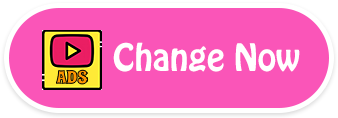
<style>
.page{position:relative;width:338px;height:118px;background:#fa55b8}
.page>*{position:absolute;margin:0}
.t1{font:33.3px "HoboStd";color:#ffffff}
</style>
<div class="page">
<p class="t1" style="left:113px;top:42px;width:187px;height:30px">Change Now</p>
</div>
